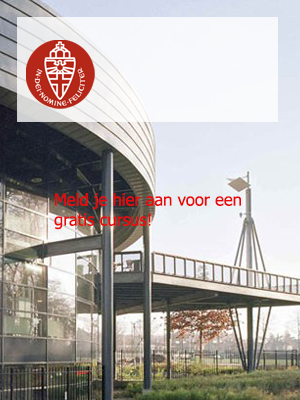
<style>
.page{position:relative;width:300px;height:400px}
.page>*{position:absolute;margin:0}
.t1{font:16.7px "Tahoma";color:#e90909}
</style>
<div class="page">
<p class="t1" style="left:54px;top:193px;width:187px;height:37px">Meld je hier aan voor een<br>gratis cursus!</p>
</div>
